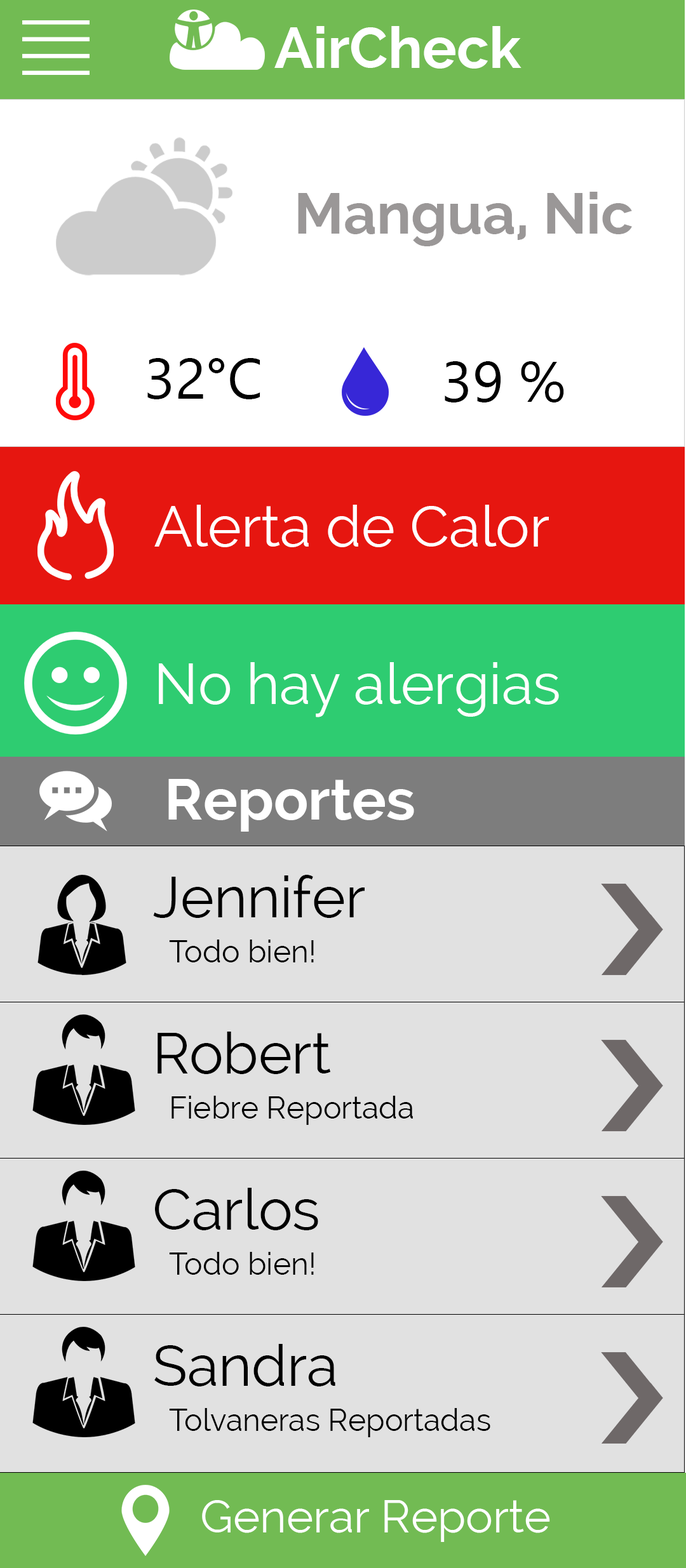
<style>
.page{position:relative;width:686px;height:1568px;background:#e1e1e1}
.page>*{position:absolute;margin:0}
.t1{font:57.1px "Raleway-Bold";color:#ffffff}
.t2{font:57.1px "Raleway-Bold";color:#9a9797}
.t3{font:57.1px "NirmalaUI";color:#000000}
.t4{font:57.1px "Raleway";color:#ffffff}
.t5{font:57.1px "Raleway";color:#000000}
.t6{font:30.5px "Raleway";color:#000000}
.t7{font:45.7px "Raleway";color:#ffffff}
</style>
<div class="page">
<p class="t1" style="left:274px;top:26px;width:247px;height:43px">AirCheck</p>
<p class="t2" style="left:298px;top:192px;width:334px;height:54px">Mangua, Nic</p>
<p class="t3" style="left:147px;top:358px;width:113px;height:41px">32°C</p>
<p class="t3" style="left:444px;top:361px;width:120px;height:41px">39 %</p>
<p class="t4" style="left:154px;top:505px;width:394px;height:42px">Alerta de Calor</p>
<p class="t4" style="left:159px;top:662px;width:400px;height:55px">No hay alergias</p>
<p class="t1" style="left:168px;top:779px;width:246px;height:53px">Reportes</p>
<p class="t5" style="left:153px;top:875px;width:211px;height:43px">Jennifer</p>
<p class="t6" style="left:169px;top:940px;width:145px;height:22px">Todo bien!</p>
<p class="t5" style="left:157px;top:1032px;width:174px;height:42px">Robert</p>
<p class="t6" style="left:171px;top:1096px;width:242px;height:29px">Fiebre Reportada</p>
<p class="t5" style="left:155px;top:1188px;width:163px;height:42px">Carlos</p>
<p class="t6" style="left:169px;top:1252px;width:145px;height:23px">Todo bien!</p>
<p class="t5" style="left:154px;top:1344px;width:181px;height:42px">Sandra</p>
<p class="t6" style="left:169px;top:1408px;width:321px;height:29px">Tolvaneras Reportadas</p>
<p class="t7" style="left:202px;top:1500px;width:348px;height:42px">Generar Reporte</p>
</div>
